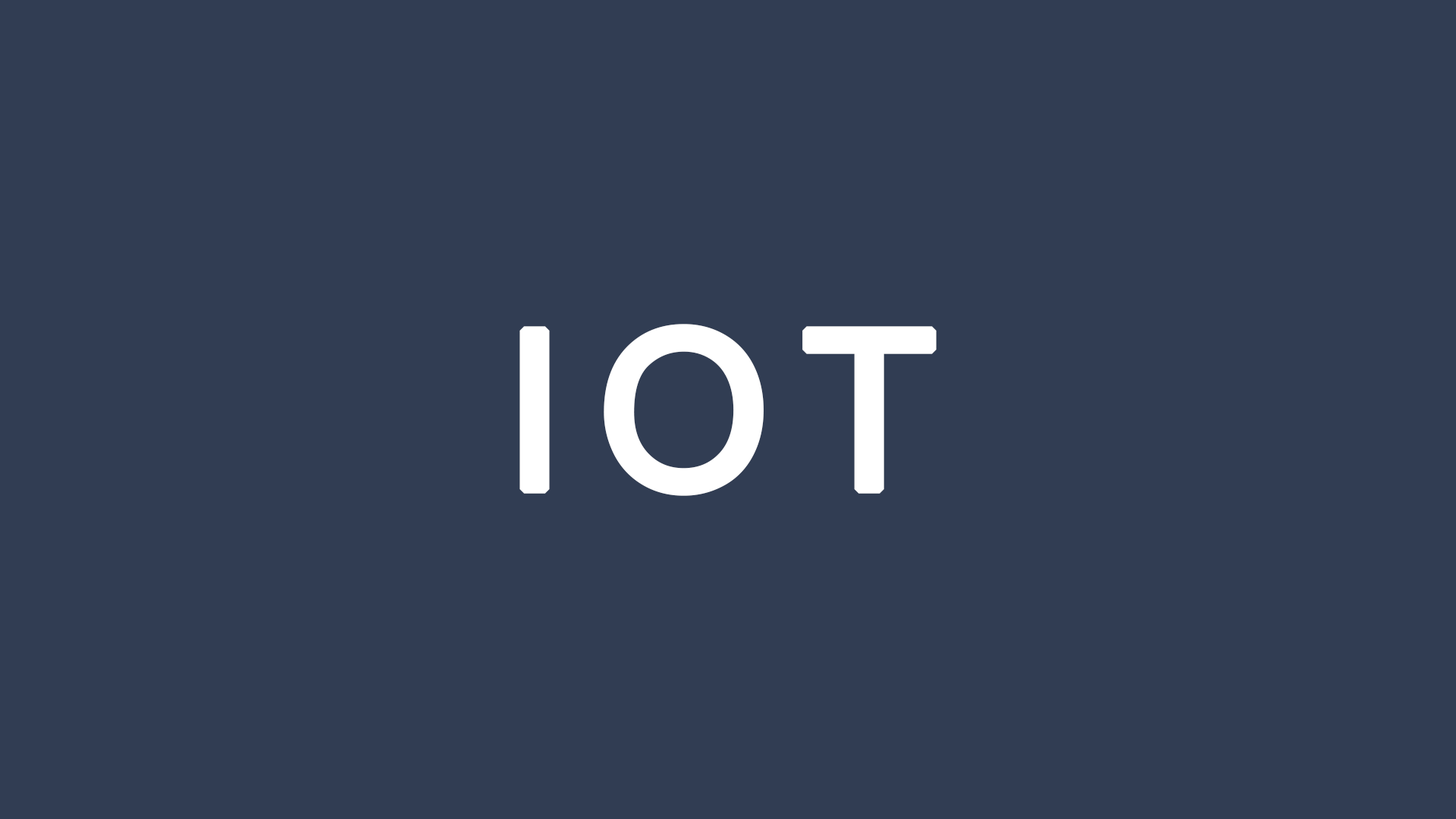
<style>
.page{position:relative;width:1456px;height:819px;background:#313d53}
.page>*{position:absolute;margin:0}
.t1{font:220.8px "ArialMT";letter-spacing:0.12em;color:#ffffff;font-weight:bold}
</style>
<div class="page">
<p class="t1" style="left:519px;top:324px;width:418px;height:172px">IOT</p>
</div>
